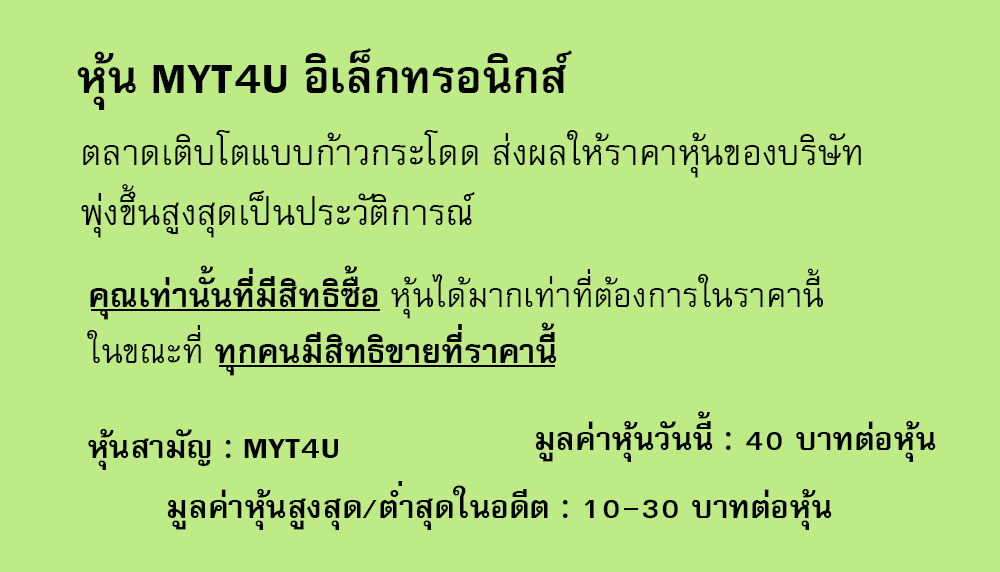
<style>
.page{position:relative;width:1000px;height:572px;background:#beeb85}
.page>*{position:absolute;margin:0}
.t1{font:64px "FreesiaUPCBold";color:#000000}
.t2{font:50px/60px "FreesiaUPC";color:#000000}
.t3{font:47px "FreesiaUPC";color:#000000}
.t4{font:47px "FreesiaUPCBold";color:#000000}
.t5{font:45px "FreesiaUPCBold";color:#000000}
</style>
<div class="page">
<p class="t1" style="left:77px;top:48px;width:495px;height:62px">หุ้น MYT4U อิเล็กทรอนิกส์</p>
<p class="t2" style="left:81px;top:130px;width:780px;height:108px">ตลาดเติบโตแบบก้าวกระโดด ส่งผลให้ราคาหุ้นของบริษัท<br>พุ่งขึ้นสูงสุดเป็นประวัติการณ์</p>
<p class="t3" style="left:87px;top:265px;width:737px;height:111px"><span class="t4">คุณเท่านั้นที่มีสิทธิซื้อ </span>หุ้นได้มากเท่าที่ต้องการในราคานี้<br>ในขณะที่<span class="t4"> ทุกคนมีสิทธิขายที่ราคานี้</span></p>
<p class="t5" style="left:535px;top:411px;width:401px;height:51px">มูลค่าหุ้นวันนี้ : 40 บาทต่อหุ้น</p>
<p class="t5" style="left:88px;top:429px;width:250px;height:41px">หุ้นสามัญ : MYT4U</p>
<p class="t5" style="left:167px;top:481px;width:665px;height:49px">มูลค่าหุ้นสูงสุด/ต่ำสุดในอดีต : 10-30 บาทต่อหุ้น</p>
</div>
